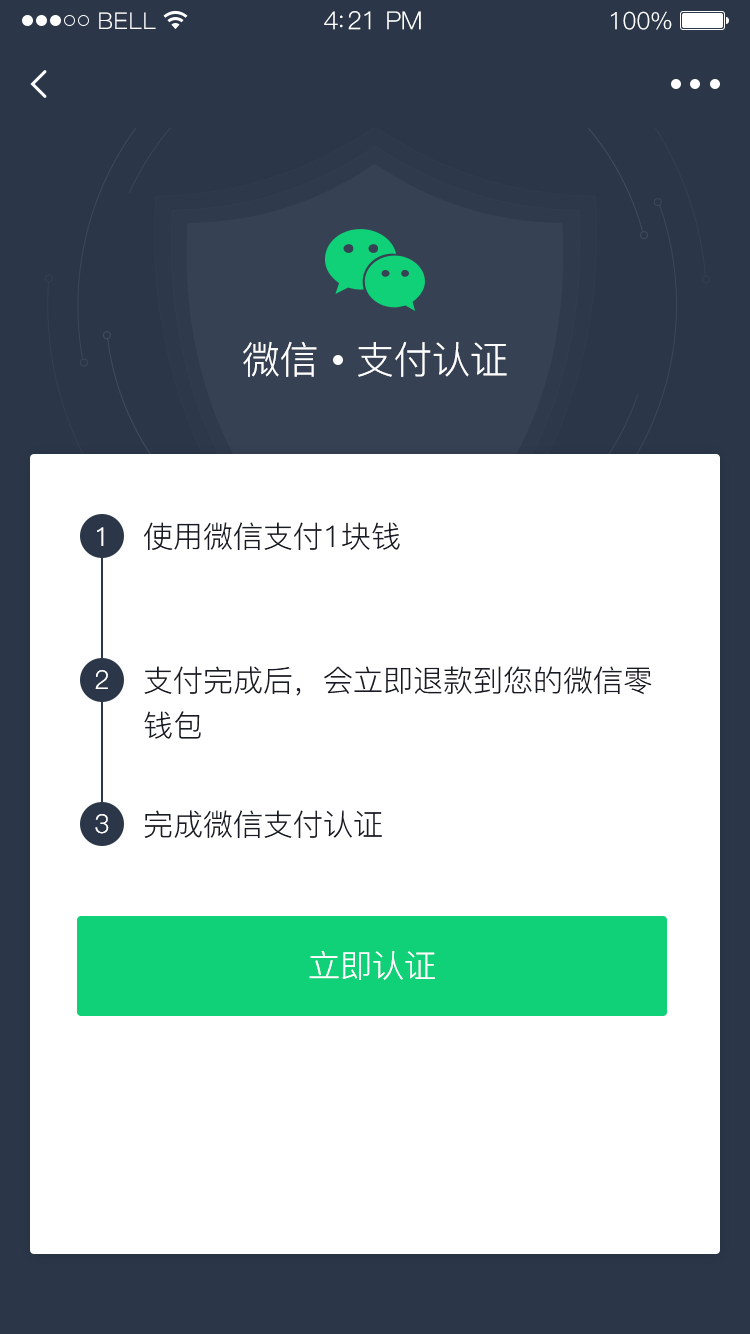
<style>
.page{position:relative;width:750px;height:1334px;background:#ffffff}
.page>*{position:absolute;margin:0}
.t1{font:23px "PingFang-SC-Regular";letter-spacing:0.02em;color:#ffffff}
.t2{font:25px "PingFang-SC-Regular";letter-spacing:-0.02em;color:#ffffff}
.t3{font:24px "PingFang-SC-Regular";letter-spacing:-0.02em;color:#ffffff}
.t4{font:38px "PingFang-SC-Regular";color:#ffffff}
.t5{font:26px "PingFang-SC-Regular";color:#ffffff}
.t6{font:30px "PingFang-SC-Regular";color:#181b23}
.t7{font:30px/45px "PingFang-SC-Regular";color:#181b23}
.t8{font:32px "PingFang-SC-Regular";color:#ffffff}
</style>
<div class="page">
<p class="t1" style="left:99px;top:12px;width:57px;height:17px">BELL</p>
<p class="t2" style="left:324px;top:11px;width:97px;height:19px">4:21 PM</p>
<p class="t3" style="left:611px;top:11px;width:61px;height:19px">100%</p>
<p class="t4" style="left:243px;top:341px;width:264px;height:36px">微信   支付认证</p>
<p class="t5" style="left:97px;top:527px;width:7px;height:19px">1</p>
<p class="t6" style="left:144px;top:522px;width:256px;height:28px">使用微信支付1块钱</p>
<p class="t5" style="left:95px;top:670px;width:13px;height:19px">2</p>
<p class="t7" style="left:144px;top:666px;width:508px;height:73px">支付完成后，会立即退款到您的微信零<br>钱包</p>
<p class="t5" style="left:95px;top:814px;width:14px;height:20px">3</p>
<p class="t6" style="left:144px;top:810px;width:238px;height:28px">完成微信支付认证</p>
<p class="t8" style="left:309px;top:951px;width:126px;height:29px">立即认证</p>
</div>
